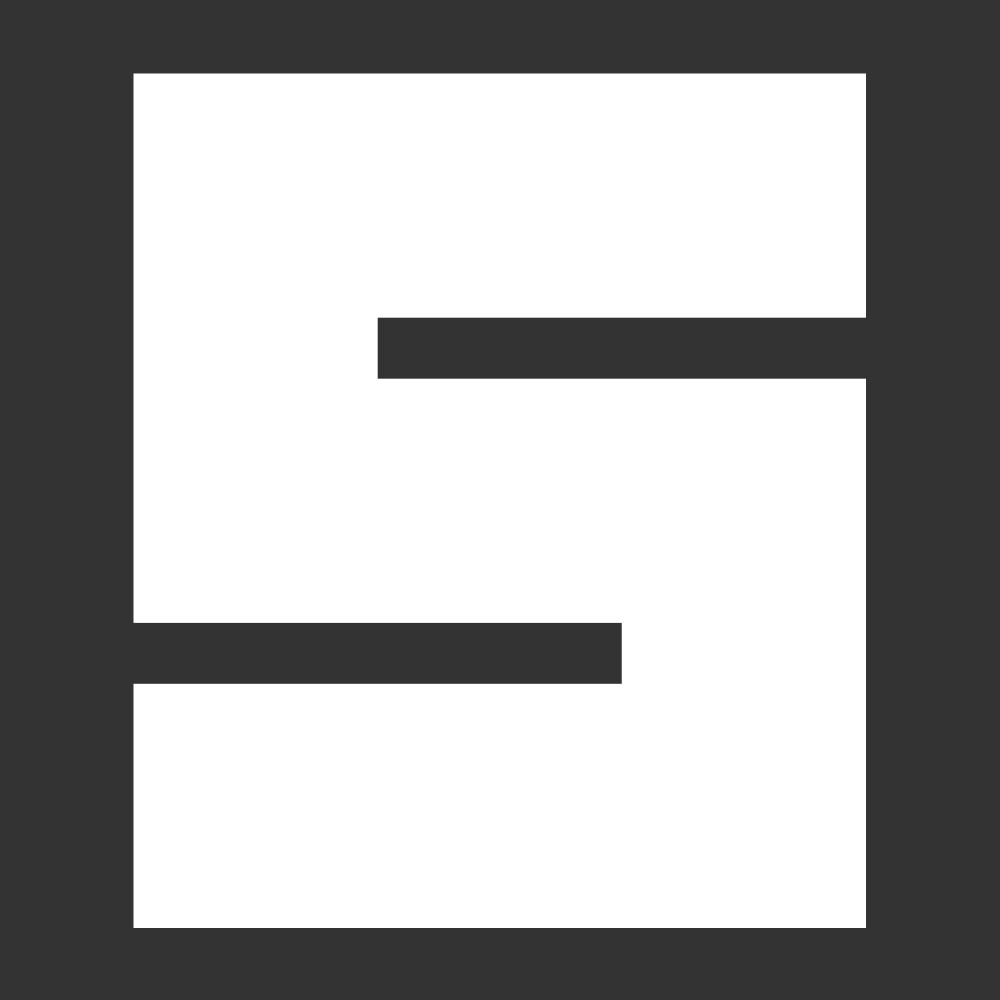
<style>
.page{position:relative;width:1000px;height:1000px;background:#ffffff}
.page>*{position:absolute;margin:0}
.t1{font:1250px "NeonOverdrive";letter-spacing:0.01em;color:#ffffff}
</style>
<div class="page">
<p class="t1" style="left:133px;top:73px;width:733px;height:855px">S</p>
</div>
